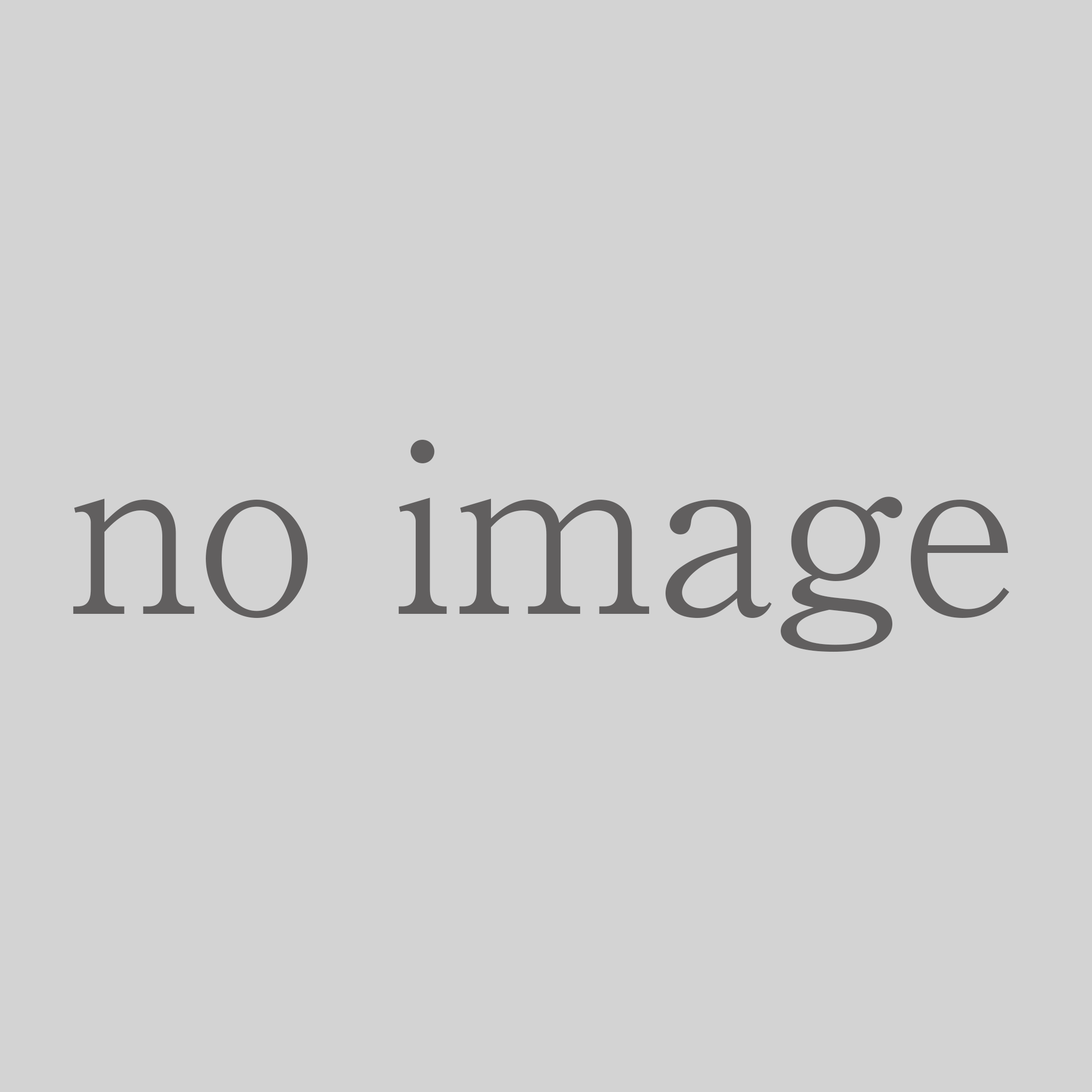
<style>
.page{position:relative;width:1092px;height:1092px;background:#d3d3d3}
.page>*{position:absolute;margin:0}
.t1{font:232.9px "RyuminPr6N-Light";color:#615f5f}
.t2{font:232.9px "HiraKakuStdN-W8";color:#615f5f}
</style>
<div class="page">
<p class="t1" style="left:73px;top:439px;width:937px;height:213px"><span class="t2"> </span>no image</p>
</div>
